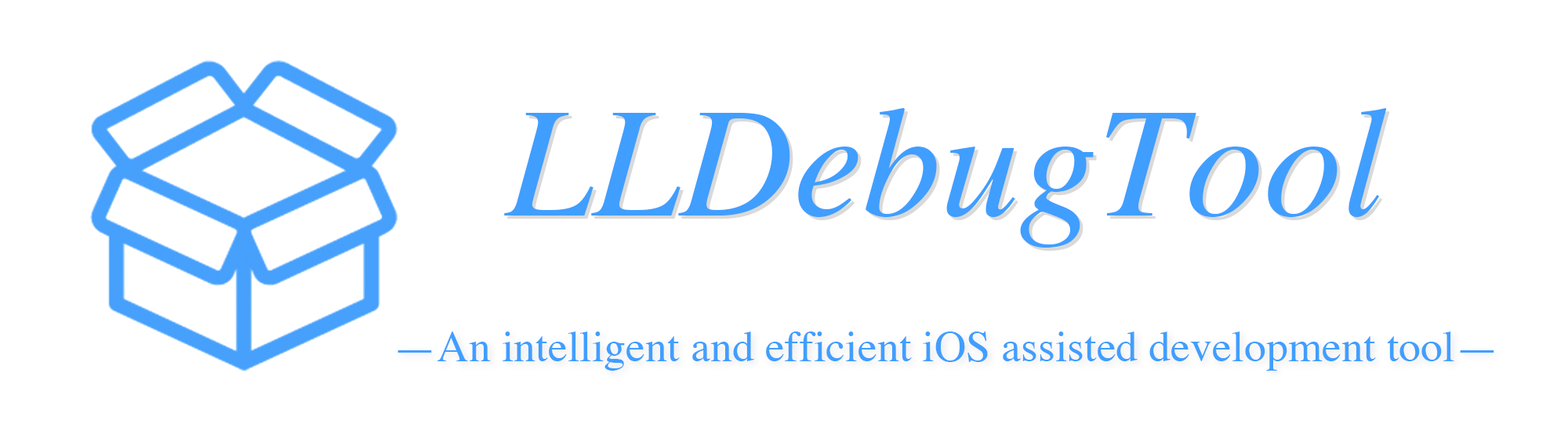
<style>
.page{position:relative;width:1568px;height:431px;background:#ffffff}
.page>*{position:absolute;margin:0}
.t1{font:156.8px "Times-Italic";color:#409eff}
.t2{font:43.9px "Times-Roman";color:#409eff}
</style>
<div class="page">
<p class="t1" style="left:504px;top:108px;width:883px;height:140px">LLDebugTool</p>
<p class="t2" style="left:397px;top:332px;width:1097px;height:39px">—An intelligent and efficient iOS assisted development tool—</p>
</div>
